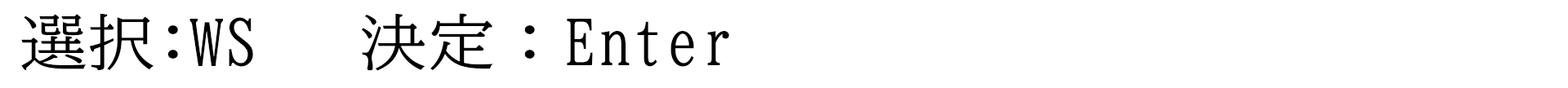
<style>
.page{position:relative;width:1568px;height:88px;background:#ffffff}
.page>*{position:absolute;margin:0}
.t1{font:61.2px "BIZ-UDMincho-Medium";color:#000000;scale:1.11 1}
</style>
<div class="page">
<p class="t1" style="left:21px;top:13px;width:708px;height:58px">選択:WS   決定：Enter</p>
</div>
